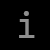
<style>
.page{position:relative;width:50px;height:50px;background:#000000}
.page>*{position:absolute;margin:0}
.t1{font:37.5px "Consolas";color:#8e8e8e}
</style>
<div class="page">
<p class="t1" style="left:19px;top:11px;width:16px;height:27px">i</p>
</div>
